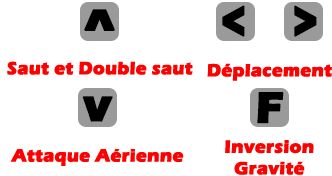
<style>
.page{position:relative;width:332px;height:176px;background:#ffffff}
.page>*{position:absolute;margin:0}
.t1{font:18px "ErasITC-Bold";color:#fd0000;font-weight:bold}
</style>
<div class="page">
<p class="t1" style="left:7px;top:61px;width:186px;height:14px">Saut et Double saut</p>
<p class="t1" style="left:207px;top:63px;width:125px;height:18px">Déplacement</p>
<p class="t1" style="left:10px;top:149px;width:174px;height:17px">Attaque Aérienne</p>
<p class="t1" style="left:225px;top:140px;width:89px;height:35px;text-align:center">Inversion Gravité</p>
</div>
